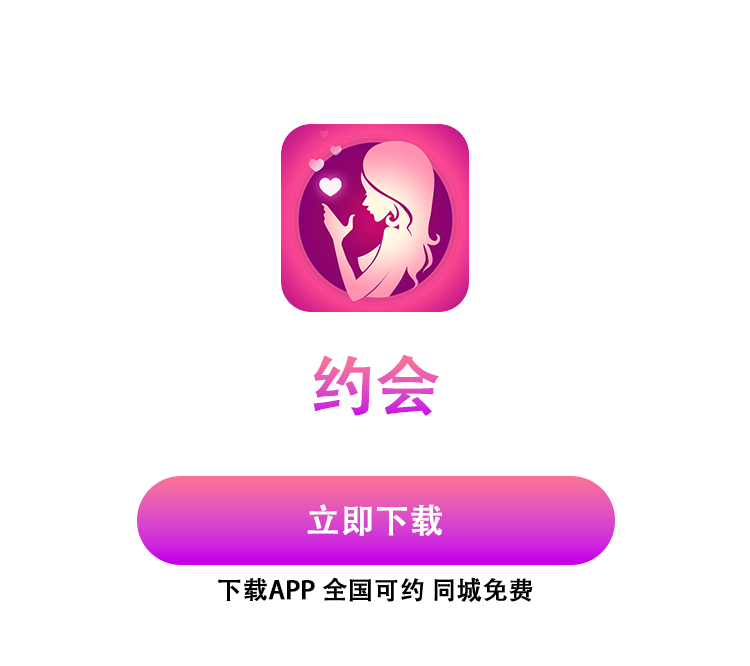
<style>
.page{position:relative;width:750px;height:666px;background:#ffffff}
.page>*{position:absolute;margin:0}
.t1{font:65px "AdobeHeitiStd-Regular";font-weight:bold}
.t2{font:34px "AdobeHeitiStd-Regular";color:#ffffff;font-weight:bold}
.t3{font:25px "AdobeHeitiStd-Regular";color:#000000;font-weight:bold}
</style>
<div class="page">
<p class="t1" style="left:313px;top:355px;width:126px;height:61px">约会</p>
<p class="t2" style="left:307px;top:504px;width:135px;height:32px">立即下载</p>
<p class="t3" style="left:218px;top:577px;width:315px;height:25px">下载APP 全国可约 同城免费</p>
</div>
